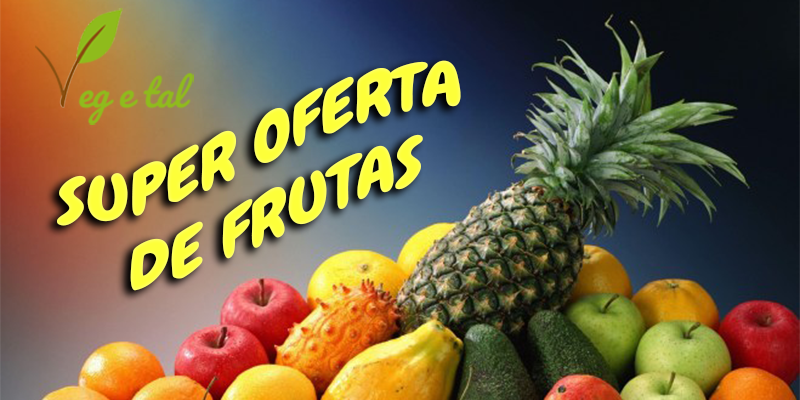
<style>
.page{position:relative;width:800px;height:400px}
.page>*{position:absolute;margin:0}
.t1{font:61.8px "Chewy-Regular";letter-spacing:-0.005em;color:#fdff39;font-style:italic;scale:1.26 1}
</style>
<div class="page">
<p class="t1" style="left:57px;top:60px;width:404px;height:231px;text-align:center;rotate:-12deg">SUPER OFERTA<br>DE FRUTAS</p>
</div>
